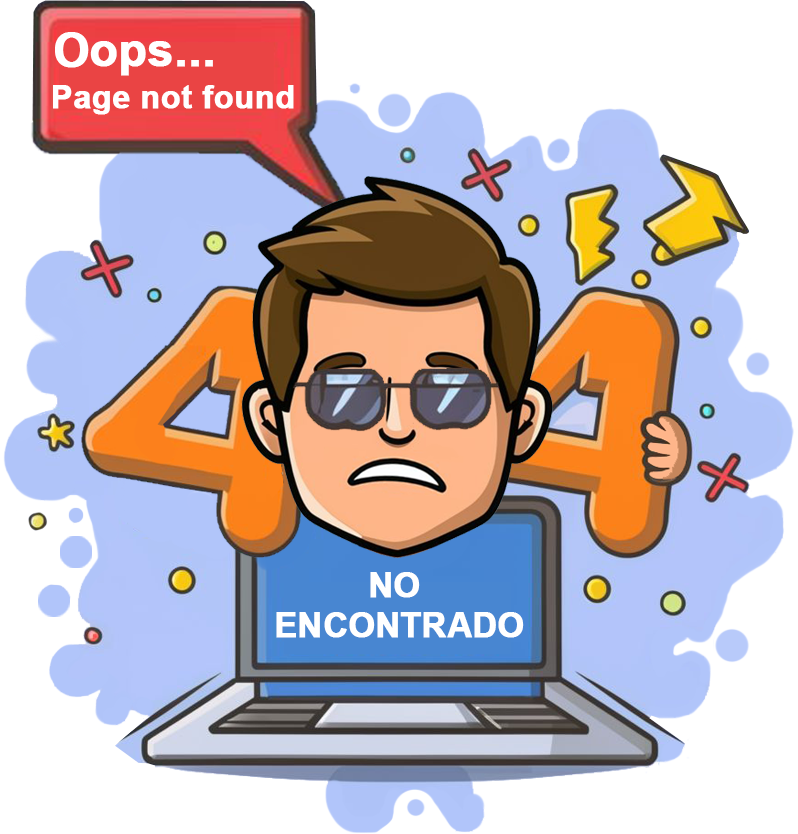
<style>
.page{position:relative;width:798px;height:834px;background:#ffffff}
.page>*{position:absolute;margin:0}
.t1{font:45.6px "Arial-BoldMT";color:#ffffff;font-weight:bold}
.t2{font:31.9px "Arial-BoldMT";color:#ffffff;font-weight:bold}
.t3{font:33.6px/10px "Arial-BoldMT";color:#ffffff;font-weight:bold}
</style>
<div class="page">
<p class="t1" style="left:55px;top:32px;width:158px;height:44px">Oops...</p>
<p class="t2" style="left:53px;top:85px;width:241px;height:30px">Page not found</p>
<p class="t3" style="left:276px;top:572px;width:248px;height:66px;text-align:center">NO <br><br><br><br>ENCONTRADO</p>
</div>
